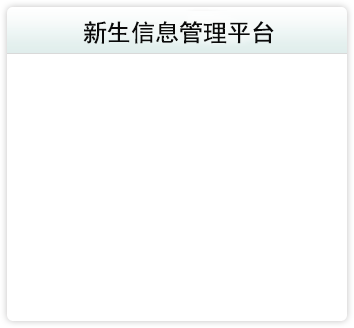
<style>
.page{position:relative;width:354px;height:328px;background:#ffffff}
.page>*{position:absolute;margin:0}
.t1{font:24px "SimHei";color:#0a0a0a}
</style>
<div class="page">
<p class="t1" style="left:83px;top:21px;width:191px;height:23px">新生信息管理平台</p>
</div>
